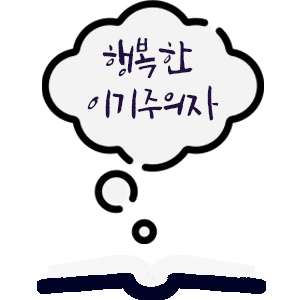
<style>
.page{position:relative;width:300px;height:300px;background:#ffffff}
.page>*{position:absolute;margin:0}
.t1{font:38px "SangSangFlowerRoad";color:#230f40}
</style>
<div class="page">
<p class="t1" style="left:87px;top:37px;width:132px;height:84px;text-align:center">행복한 <br>이기주의자</p>
</div>
